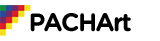
<style>
.page{position:relative;width:160px;height:41px;background:#ffffff}
.page>*{position:absolute;margin:0}
.t1{font:25.1px "GothamRounded-Bold";letter-spacing:-0.07em;color:#000000}
</style>
<div class="page">
<p class="t1" style="left:30px;top:13px;width:101px;height:19px">PACHArt</p>
</div>
